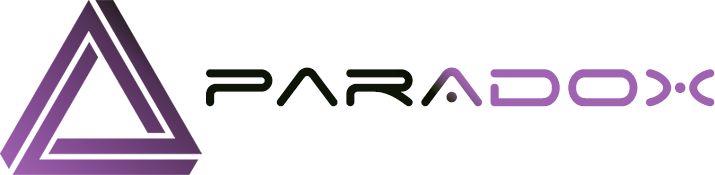
<style>
.page{position:relative;width:715px;height:175px;background:#ffffff}
.page>*{position:absolute;margin:0}
.t1{font:85px "SpaceAge"}
</style>
<div class="page">
<p class="t1" style="left:206px;top:67px;width:509px;height:40px">parAdoX</p>
</div>
